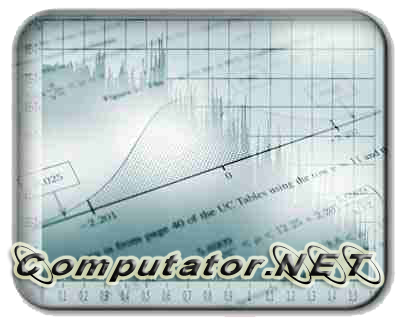
<style>
.page{position:relative;width:400px;height:320px}
.page>*{position:absolute;margin:0}
.t1{font:36px "13Misa"}
</style>
<div class="page">
<p class="t1" style="left:14px;top:245px;width:367px;height:40px">Computator.NET</p>
</div>
